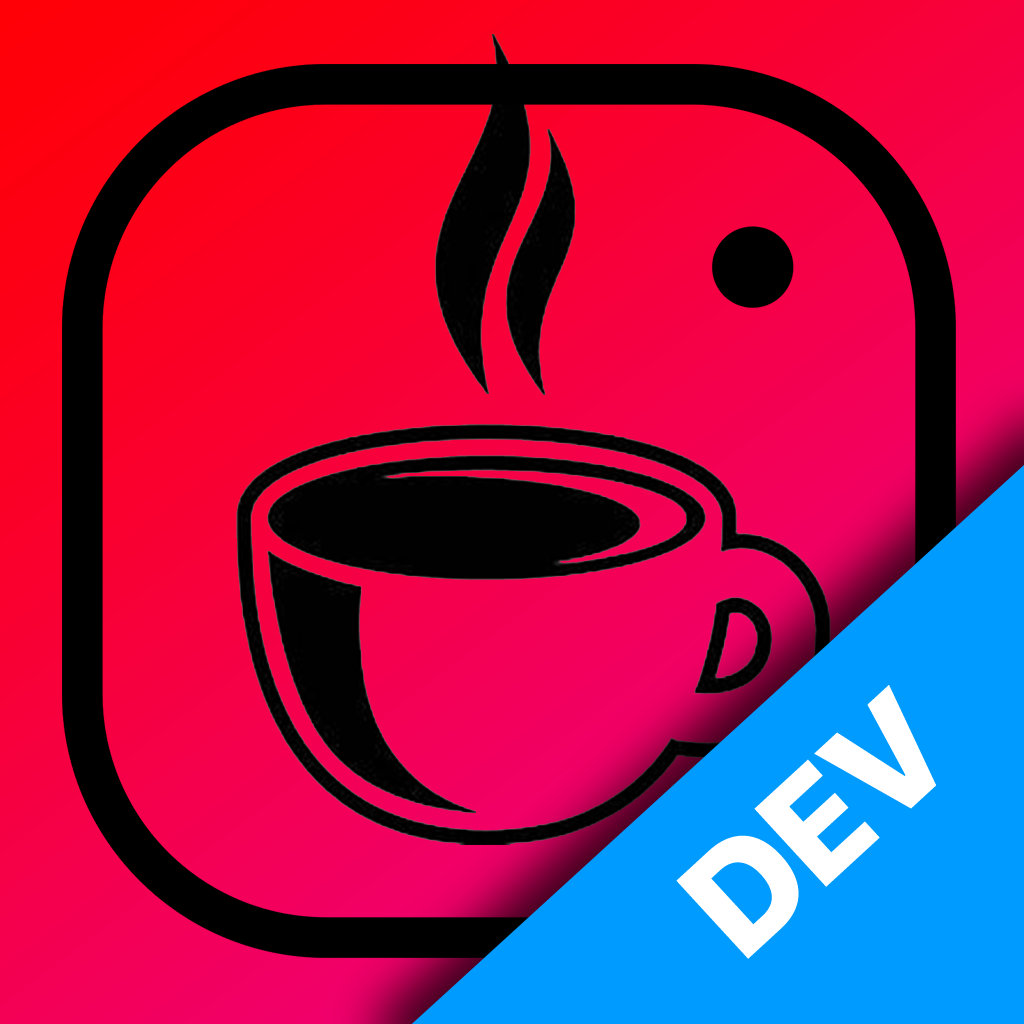
<style>
.page{position:relative;width:1024px;height:1024px}
.page>*{position:absolute;margin:0}
.t1{font:150px "SFProText-Heavy";letter-spacing:-0.05em;color:#ffffff}
</style>
<div class="page">
<p class="t1" style="left:676px;top:685px;width:261px;height:274px;rotate:-43deg">DEV</p>
</div>
